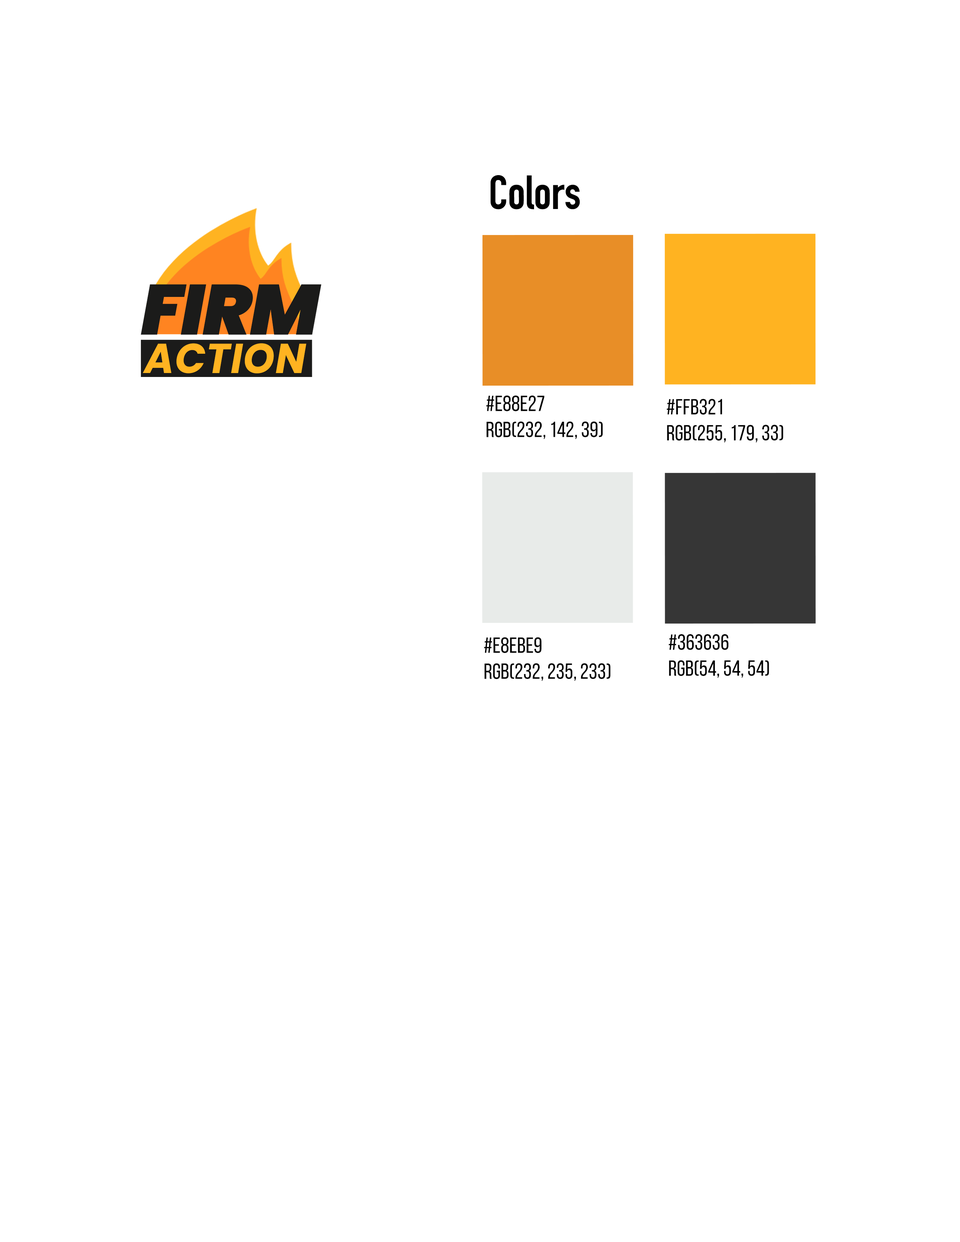
<style>
.page{position:relative;width:960px;height:1242px;background:#ffffff}
.page>*{position:absolute;margin:0}
.t1{font:47.1px "DINCondensed-Bold";color:#000000}
.t2{font:22px/2.4px "BebasNeueRegular";color:#000000}
</style>
<div class="page">
<p class="t1" style="left:490px;top:175px;width:90px;height:34px">Colors</p>
<p class="t2" style="left:486px;top:395px;width:117px;height:44px">#e88e27<br>rgb(232, 142, 39)</p>
<p class="t2" style="left:667px;top:399px;width:116px;height:44px">#FFB321<br>rgb(255, 179, 33)</p>
<p class="t2" style="left:484px;top:637px;width:127px;height:44px">#e8ebe9<br>rgb(232, 235, 233)</p>
<p class="t2" style="left:669px;top:634px;width:100px;height:44px">#363636<br>rgb(54, 54, 54)</p>
</div>
